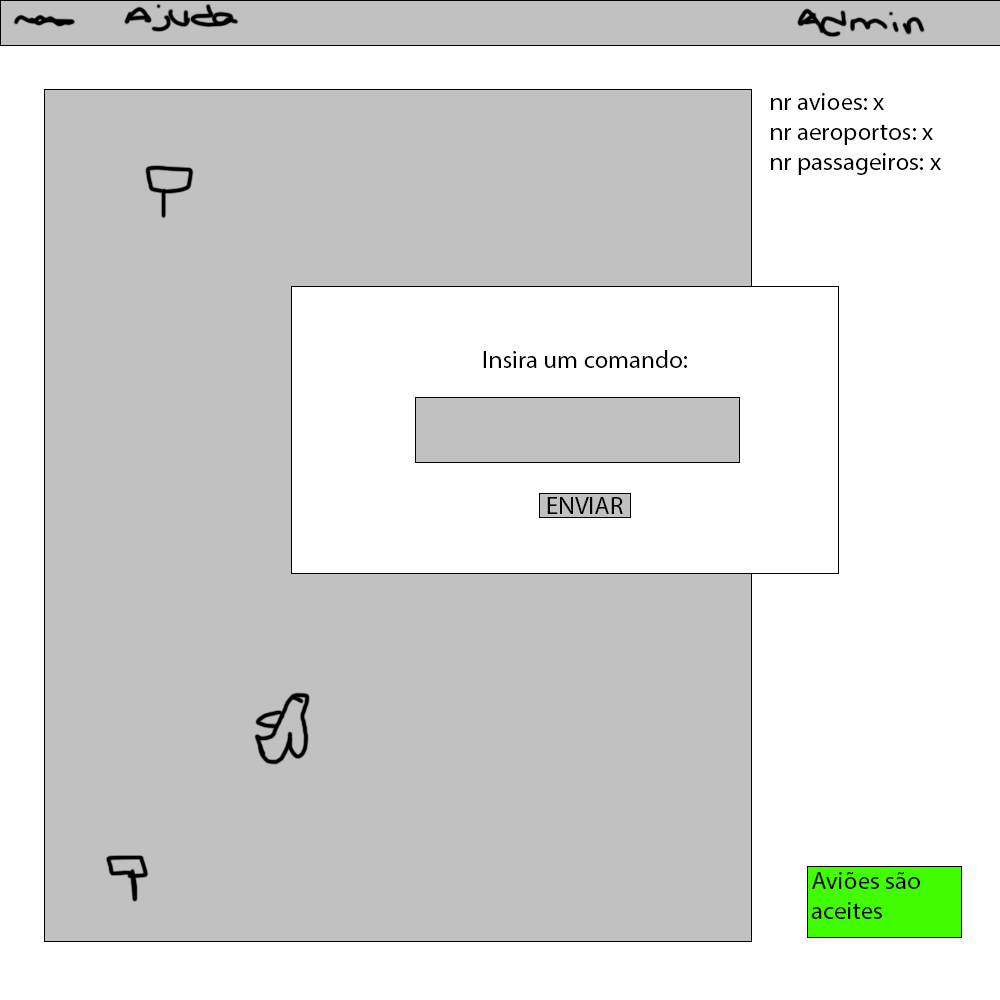
<style>
.page{position:relative;width:1000px;height:1000px;background:#c1c1c1}
.page>*{position:absolute;margin:0}
.t1{font:25px "MyriadPro-Regular";color:#000000}
</style>
<div class="page">
<p class="t1" style="left:771px;top:93px;width:170px;height:82px">nr avioes: x<br>nr aeroportos: x<br>nr passageiros: x</p>
<p class="t1" style="left:483px;top:350px;width:204px;height:18px">Insira um comando:</p>
<p class="t1" style="left:547px;top:497px;width:76px;height:17px">ENVIAR</p>
<p class="t1" style="left:811px;top:872px;width:109px;height:47px">Aviões são aceites</p>
</div>
